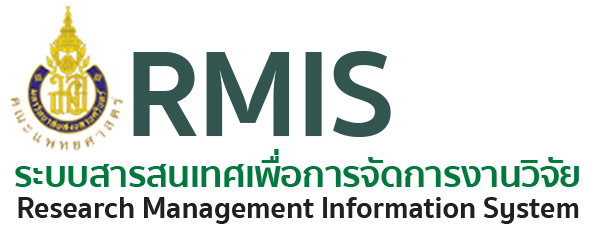
<style>
.page{position:relative;width:591px;height:230px;background:#ffffff}
.page>*{position:absolute;margin:0}
.t1{font:123.8px "SukhumvitSet-Bold";letter-spacing:-0.01em;color:#33554f}
.t2{font:36.8px "SukhumvitSet-Bold";letter-spacing:-0.01em;color:#01793d}
.t3{font:30.6px "SukhumvitSet-Bold";letter-spacing:-0.01em;color:#202020}
</style>
<div class="page">
<p class="t1" style="left:133px;top:51px;width:258px;height:86px">RMIS</p>
<p class="t2" style="left:15px;top:149px;width:564px;height:38px">ระบบสารสนเทศเพื่อการจัดการงานวิจัย</p>
<p class="t3" style="left:18px;top:197px;width:561px;height:27px">Research Management Information System</p>
</div>
